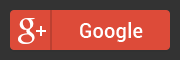
<style>
.page{position:relative;width:180px;height:60px;background:#dd4b39}
.page>*{position:absolute;margin:0}
.t1{font:20px "Roboto-Medium";letter-spacing:0.01em;color:#ffffff}
</style>
<div class="page">
<p class="t1" style="left:80px;top:22px;width:63px;height:20px">Google</p>
</div>
